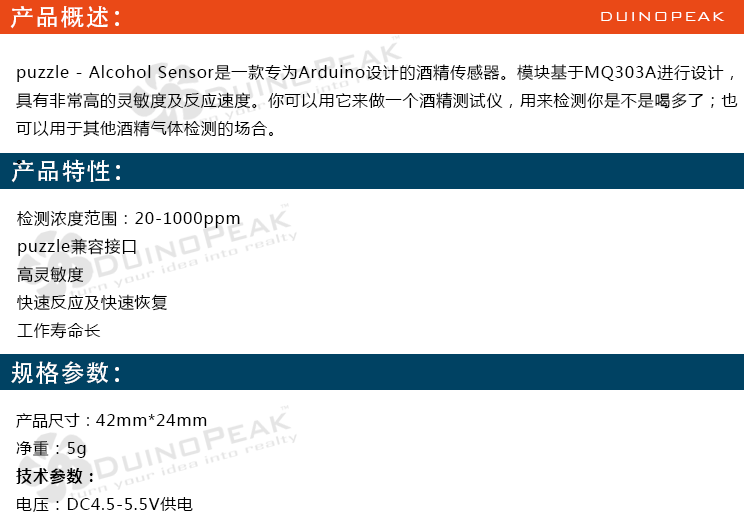
<style>
.page{position:relative;width:744px;height:519px;background:#ffffff}
.page>*{position:absolute;margin:0}
.t1{font:24px "AdobeHeitiStd-Regular";letter-spacing:0.05em;color:#ffffff}
.t2{font:18px "BankGothicBT-Light";letter-spacing:0.05em;color:#ffffff}
.t3{font:16px "MicrosoftYaHei";letter-spacing:0.05em;color:#000000}
.t4{font:16px "MicrosoftYaHei";color:#000000}
.t5{font:16px "MicrosoftYaHei-Bold";letter-spacing:0.05em;color:#000000}
</style>
<div class="page">
<p class="t1" style="left:10px;top:6px;width:109px;height:23px">产品概述：</p>
<p class="t2" style="left:601px;top:12px;width:124px;height:9px">DUINOPEAK</p>
<p class="t3" style="left:16px;top:64px;width:722px;height:100px">puzzle - Alcohol Sensor是一款专为Arduino设计的酒精传感器。模块基于MQ303A进行设计，<br>具有非常高的灵敏度及反应速度。你可以用它来做一个酒精测试仪，用来检测你是不是喝多了；也<br>可以用于其他酒精气体检测的场合。<br>。</p>
<p class="t1" style="left:11px;top:159px;width:109px;height:24px">产品特性：</p>
<p class="t3" style="left:17px;top:210px;width:223px;height:129px">检测浓度范围：20-1000ppm<br>puzzle兼容接口<br>高灵敏度<br>快速反应及快速恢复<br>工作寿命长</p>
<p class="t1" style="left:11px;top:361px;width:108px;height:23px">规格参数：</p>
<p class="t3" style="left:16px;top:413px;width:191px;height:99px"><span class="t4">产品尺寸：</span>42mm*24mm<br>净重：5g<br><span class="t5">技术参数：<br></span>电压：DC4.5-5.5V供电</p>
</div>
